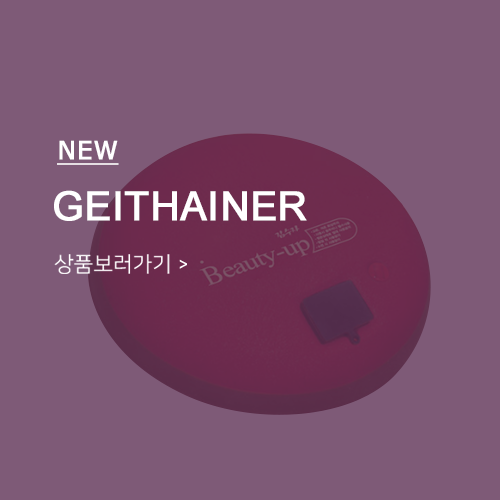
<style>
.page{position:relative;width:500px;height:500px;background:#7e5a77}
.page>*{position:absolute;margin:0}
.t1{font:25px "Verdana";color:#ffffff;font-weight:bold;text-decoration:underline}
.t2{font:40px "ArialMT";color:#ffffff;font-weight:bold}
</style>
<div class="page">
<p class="t1" style="left:57px;top:140px;width:62px;height:25px">NEW</p>
<p class="t2" style="left:54px;top:190px;width:253px;height:31px">GEITHAINER</p>
</div>
